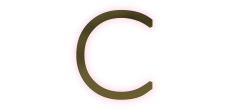
<style>
.page{position:relative;width:229px;height:111px;background:#ffffff}
.page>*{position:absolute;margin:0}
.t1{font:118px "GeosansLight";color:#665e2f;font-weight:bold}
</style>
<div class="page">
<p class="t1" style="left:76px;top:9px;width:77px;height:91px">C</p>
</div>
